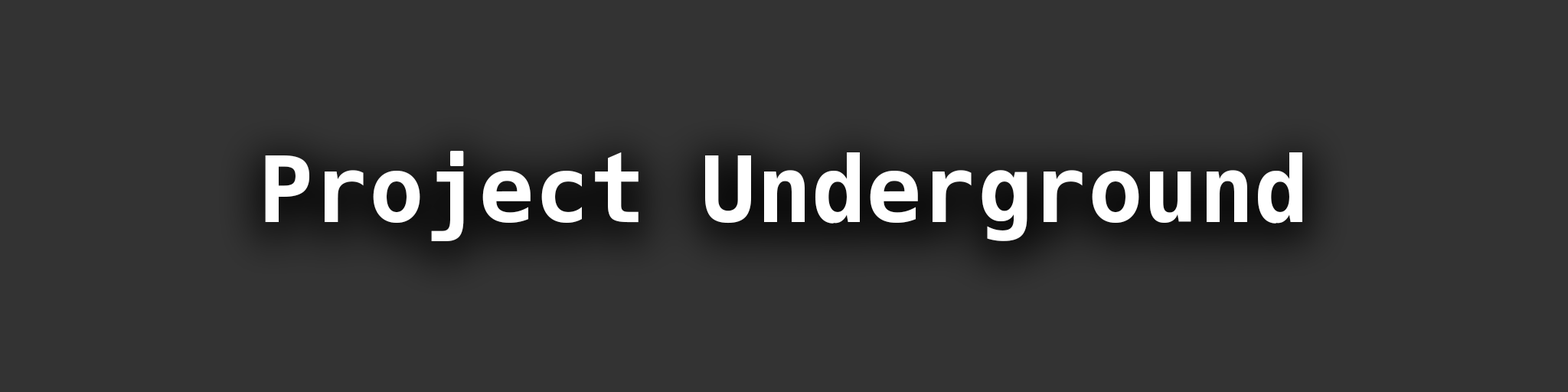
<style>
.page{position:relative;width:1568px;height:392px;background:#333333}
.page>*{position:absolute;margin:0}
.t1{font:91.9px "Hack-Bold";color:#ffffff}
</style>
<div class="page">
<p class="t1" style="left:265px;top:151px;width:1037px;height:90px">Project Underground</p>
</div>
